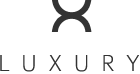
<style>
.page{position:relative;width:140px;height:74px;background:#ffffff}
.page>*{position:absolute;margin:0}
.t1{font:24.6px "Colaborate-Thin";letter-spacing:0.465em;color:#333333}
</style>
<div class="page">
<p class="t1" style="left:0px;top:55px;width:139px;height:17px">LUXURY</p>
</div>
